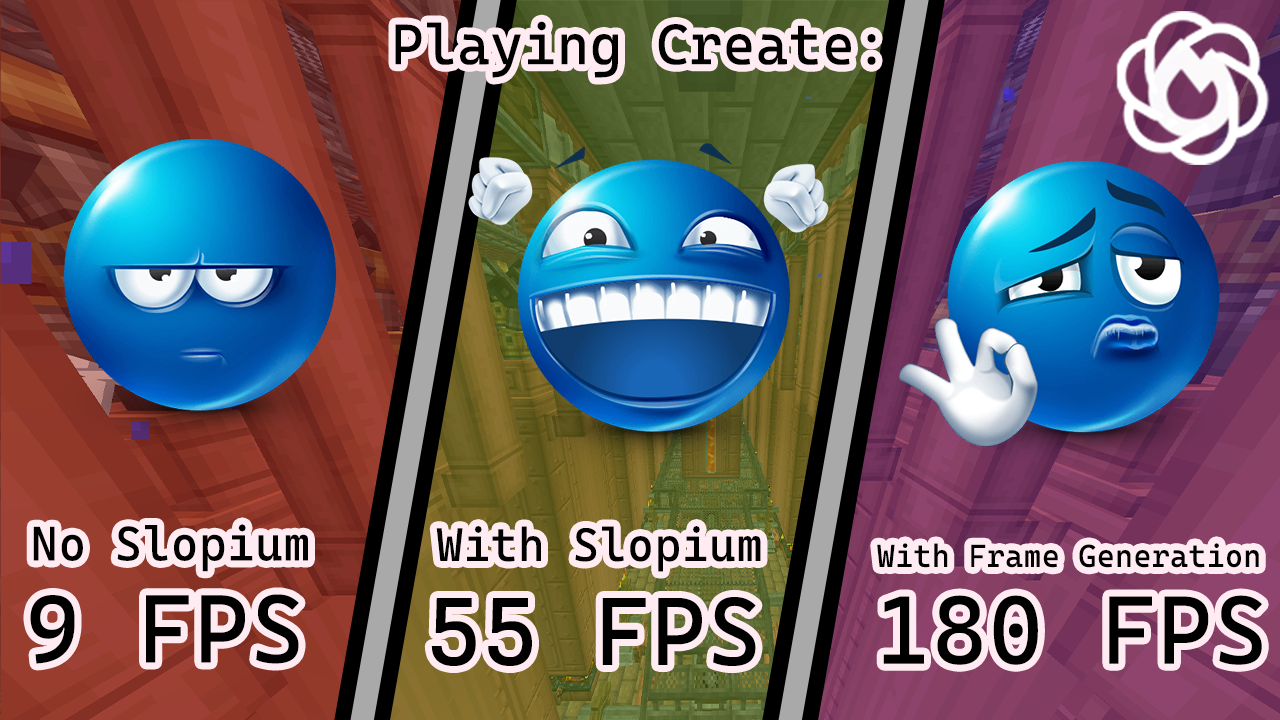
<style>
.page{position:relative;width:1280px;height:720px}
.page>*{position:absolute;margin:0}
.t1{font:56.9px "CascadiaCode-Regular";letter-spacing:0.02em;color:#000000;scale:0.96 1}
.t2{font:48.2px "CascadiaCode-Regular";letter-spacing:0.02em;color:#000000;scale:0.96 1}
.t3{font:46.8px "CascadiaCode-Regular";letter-spacing:0.02em;color:#000000;scale:0.96 1}
.t4{font:31.4px "CascadiaCode-Regular";letter-spacing:0.02em;color:#000000;scale:0.96 1}
.t5{font:96.6px "CascadiaCode-Regular";letter-spacing:0.02em;color:#000000;scale:0.96 1}
</style>
<div class="page">
<p class="t1" style="left:395px;top:21px;width:481px;height:57px">Playing Create:</p>
<p class="t2" style="left:33px;top:524px;width:275px;height:48px">No Slopium</p>
<p class="t3" style="left:436px;top:526px;width:325px;height:46px">With Slopium</p>
<p class="t4" style="left:877px;top:543px;width:382px;height:25px">With Frame Generation</p>
<p class="t5" style="left:30px;top:594px;width:269px;height:70px">9 FPS</p>
<p class="t5" style="left:431px;top:597px;width:325px;height:69px">55 FPS</p>
<p class="t5" style="left:883px;top:595px;width:379px;height:70px">180 FPS</p>
</div>
